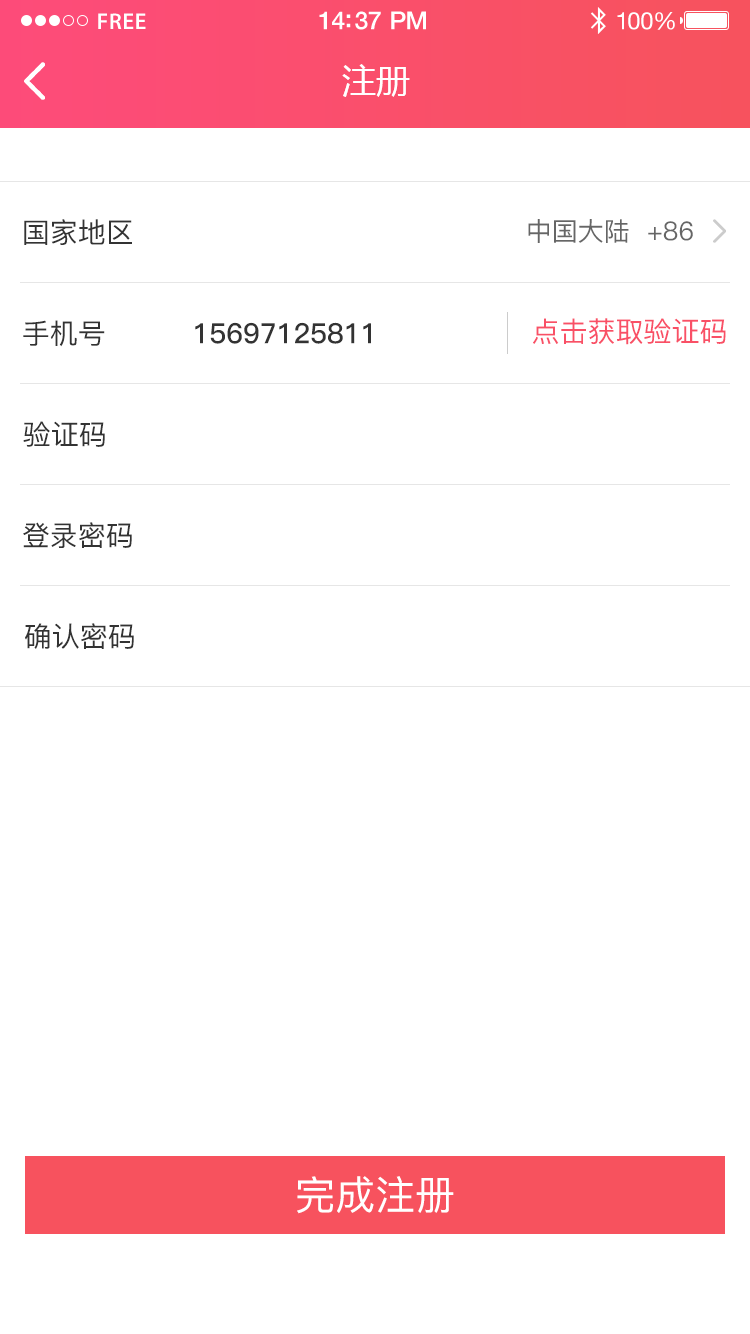
<style>
.page{position:relative;width:750px;height:1334px;background:#ffffff}
.page>*{position:absolute;margin:0}
.t1{font:23px "MyriadPro-Semibold";letter-spacing:0.02em;color:#ffffff}
.t2{font:25px "HelveticaNeue-Medium";letter-spacing:-0.02em;color:#ffffff}
.t3{font:24px "HelveticaNeue";letter-spacing:-0.02em;color:#ffffff}
.t4{font:34px "MicrosoftYaHei";color:#ffffff;text-transform:uppercase}
.t5{font:28px "PingFang-SC-Medium";color:#333333;text-transform:uppercase}
.t6{font:26px "PingFang-SC-Medium";color:#666666;text-transform:uppercase}
.t7{font:28px "PingFang-SC-Medium";color:#f95066;text-transform:uppercase}
.t8{font:28px "PingFang-SC-Bold";color:#333333;text-transform:uppercase}
.t9{font:40px "PingFang-SC-Medium";color:#ffffff;text-transform:uppercase}
</style>
<div class="page">
<p class="t1" style="left:98px;top:13px;width:48px;height:16px">FREE</p>
<p class="t2" style="left:319px;top:11px;width:107px;height:19px">14:37 PM</p>
<p class="t3" style="left:617px;top:12px;width:58px;height:18px">100%</p>
<p class="t4" style="left:342px;top:64px;width:68px;height:33px">注册</p>
<p class="t5" style="left:24px;top:219px;width:108px;height:26px">国家地区</p>
<p class="t6" style="left:528px;top:219px;width:165px;height:24px">中国大陆  +86</p>
<p class="t7" style="left:533px;top:318px;width:193px;height:27px">点击获取验证码</p>
<p class="t5" style="left:23px;top:320px;width:82px;height:27px">手机号</p>
<p class="t8" style="left:195px;top:322px;width:176px;height:22px">15697125811</p>
<p class="t5" style="left:23px;top:421px;width:82px;height:26px">验证码</p>
<p class="t5" style="left:23px;top:522px;width:109px;height:26px">登录密码</p>
<p class="t5" style="left:25px;top:623px;width:109px;height:26px">确认密码</p>
<p class="t9" style="left:297px;top:1176px;width:157px;height:38px">完成注册</p>
</div>
